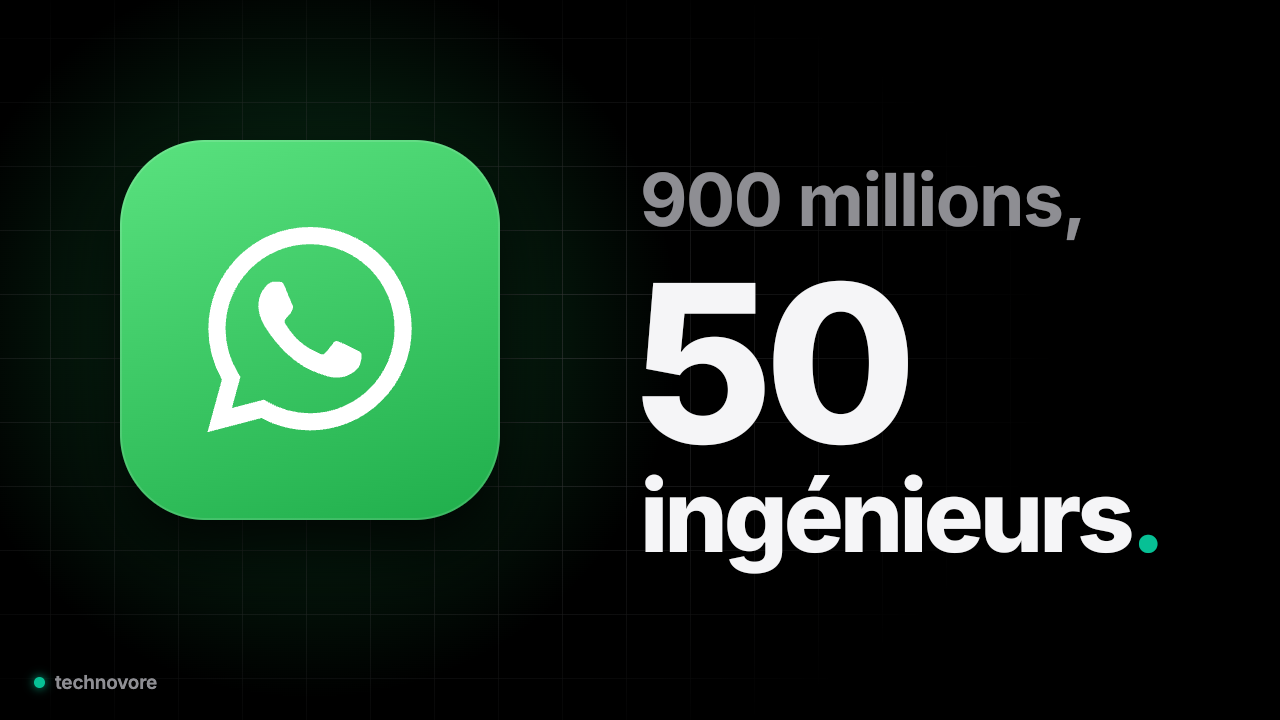
<style>
.page{position:relative;width:1280px;height:720px;background:#000000}
.page>*{position:absolute;margin:0}
.t1{font:73px "Inter-Bold";letter-spacing:-0.02em;color:#8e8e93}
.t2{font:220px "Inter-ExtraBold";letter-spacing:-0.04em;color:#f5f5f7}
.t3{font:100px "Inter-ExtraBold";letter-spacing:-0.04em;color:#f5f5f7}
.t4{font:100px "Inter-ExtraBold";letter-spacing:-0.04em;color:#07c095}
</style>
<div class="page">
<p class="t1" style="left:642px;top:169px;width:440px;height:73px">900 millions,</p>
<p class="t2" style="left:641px;top:280px;width:268px;height:167px">50</p>
<p class="t3" style="left:644px;top:474px;width:515px;height:101px">ingénieurs<span class="t4">.</span></p>
</div>
